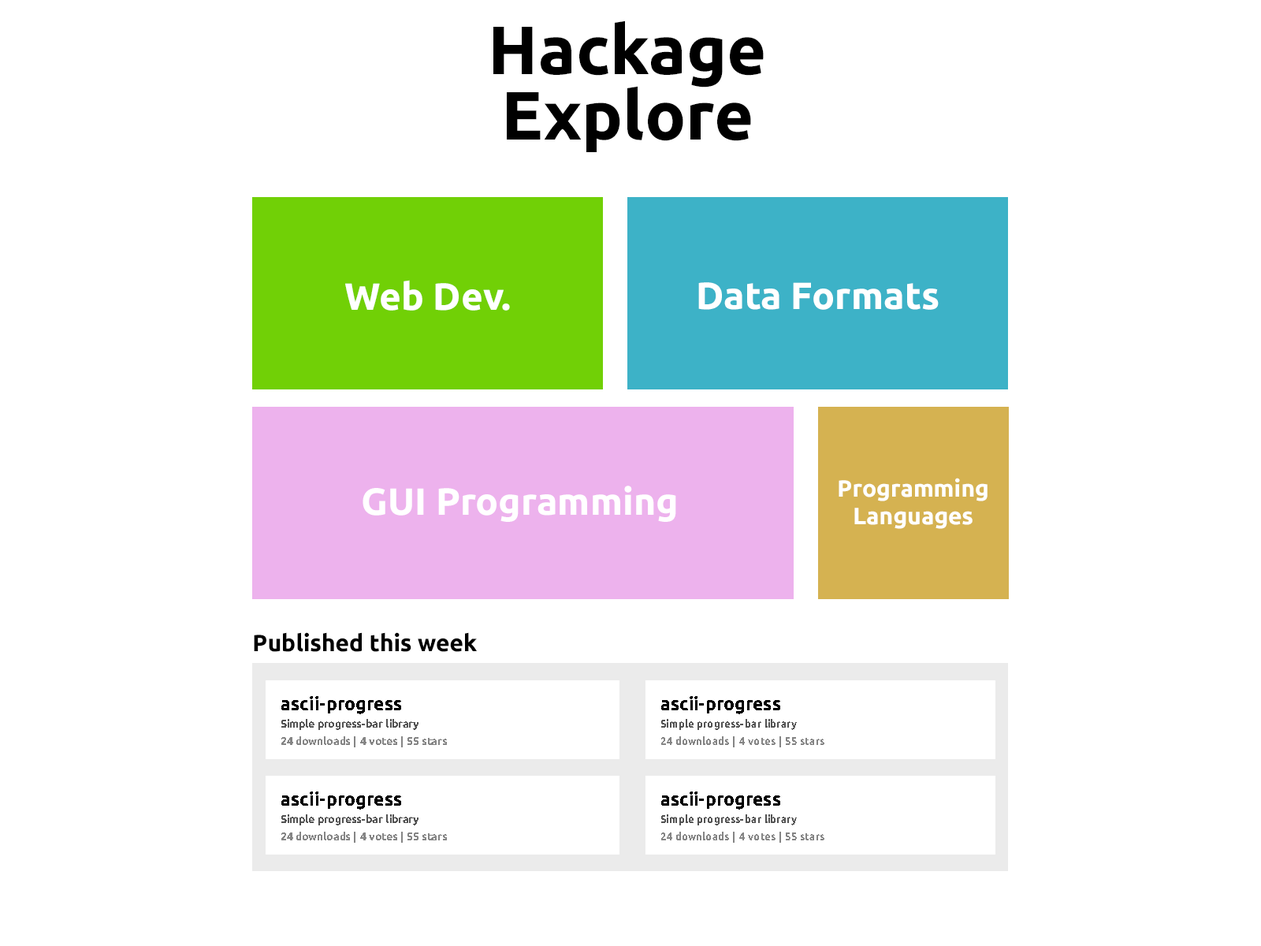
<style>
.page{position:relative;width:1261px;height:946px;background:#ffffff}
.page>*{position:absolute;margin:0}
.t1{font:68.2px/65.3px "Ubuntu-Bold";color:#000000}
.t2{font:37.8px "Ubuntu-Bold";color:#ffffff}
.t3{font:23.6px/27.6px "Ubuntu-Bold";color:#ffffff}
.t4{font:23.6px "Ubuntu-Bold";color:#000000}
.t5{font:18.9px "Ubuntu-Bold";color:#000000;scale:0.97 1}
.t6{font:18.9px "Ubuntu-Bold";color:#000000;scale:0.96 1}
.t7{font:11px "Ubuntu-Bold";color:#535353;scale:0.97 1}
.t8{font:11px "Ubuntu-Bold";color:#535353;scale:0.96 1}
.t9{font:11px "Ubuntu-Bold";color:#858585;scale:0.97 1}
.t10{font:11px "Ubuntu-Bold";color:#858585;scale:0.96 1}
</style>
<div class="page">
<p class="t1" style="left:493px;top:20px;width:271px;height:132px;text-align:center">Hackage<br>Explore</p>
<p class="t2" style="left:345px;top:280px;width:165px;height:31px">Web Dev.</p>
<p class="t2" style="left:698px;top:282px;width:241px;height:28px">Data Formats</p>
<p class="t2" style="left:363px;top:485px;width:313px;height:37px">GUI Programming</p>
<p class="t3" style="left:839px;top:478px;width:148px;height:51px;text-align:center">Programming<br>Languages</p>
<p class="t4" style="left:254px;top:632px;width:223px;height:20px">Published this week</p>
<p class="t5" style="left:281px;top:696px;width:120px;height:18px">ascii-progress</p>
<p class="t6" style="left:661px;top:696px;width:119px;height:18px">ascii-progress</p>
<p class="t7" style="left:281px;top:719px;width:137px;height:11px">Simple progress-bar library</p>
<p class="t8" style="left:661px;top:719px;width:136px;height:11px">Simple progress-bar library</p>
<p class="t9" style="left:281px;top:736px;width:166px;height:11px">24 downloads | 4 votes | 55 stars</p>
<p class="t10" style="left:661px;top:736px;width:163px;height:11px">24 downloads | 4 votes | 55 stars</p>
<p class="t5" style="left:281px;top:791px;width:120px;height:18px">ascii-progress</p>
<p class="t6" style="left:661px;top:791px;width:119px;height:18px">ascii-progress</p>
<p class="t7" style="left:281px;top:814px;width:137px;height:11px">Simple progress-bar library</p>
<p class="t8" style="left:661px;top:814px;width:136px;height:11px">Simple progress-bar library</p>
<p class="t9" style="left:281px;top:831px;width:166px;height:11px">24 downloads | 4 votes | 55 stars</p>
<p class="t10" style="left:661px;top:831px;width:163px;height:11px">24 downloads | 4 votes | 55 stars</p>
</div>
